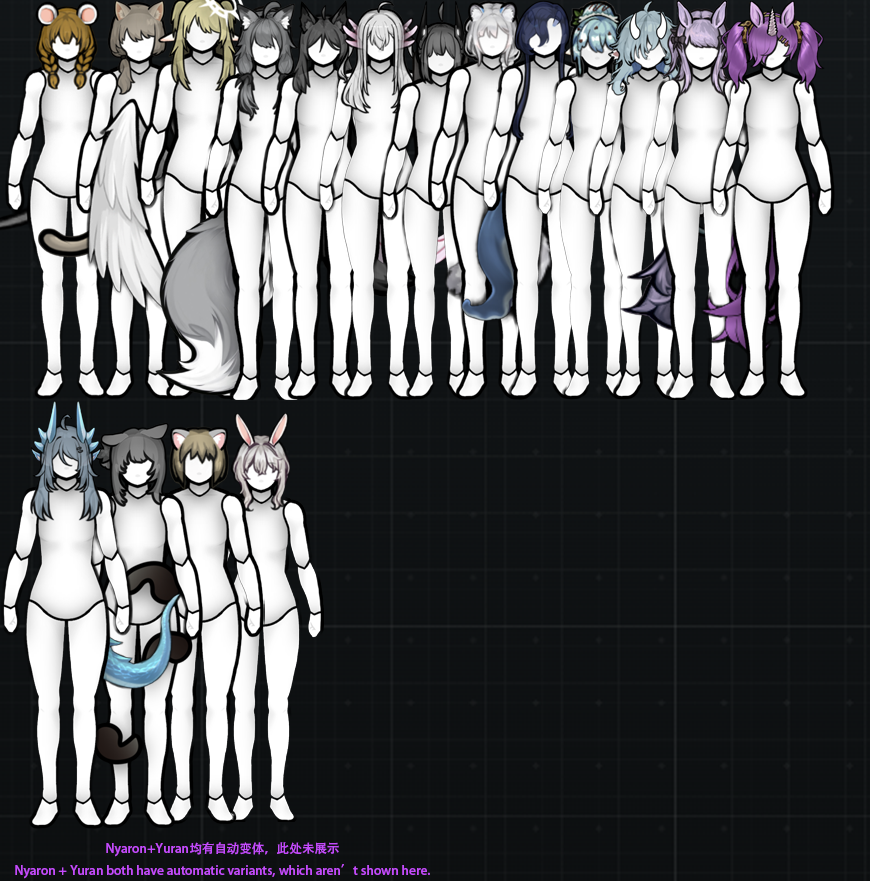
<style>
.page{position:relative;width:870px;height:881px}
.page>*{position:absolute;margin:0}
.t1{font:12.5px "AdobeHeitiStd-Regular";color:#c34bfa}
</style>
<div class="page">
<p class="t1" style="left:15px;top:842px;width:415px;height:37px;text-align:center">Nyaron+Yuran均有自动变体，此处未展示<br>Nyaron + Yuran both have automatic variants, which aren’t shown here.</p>
</div>
